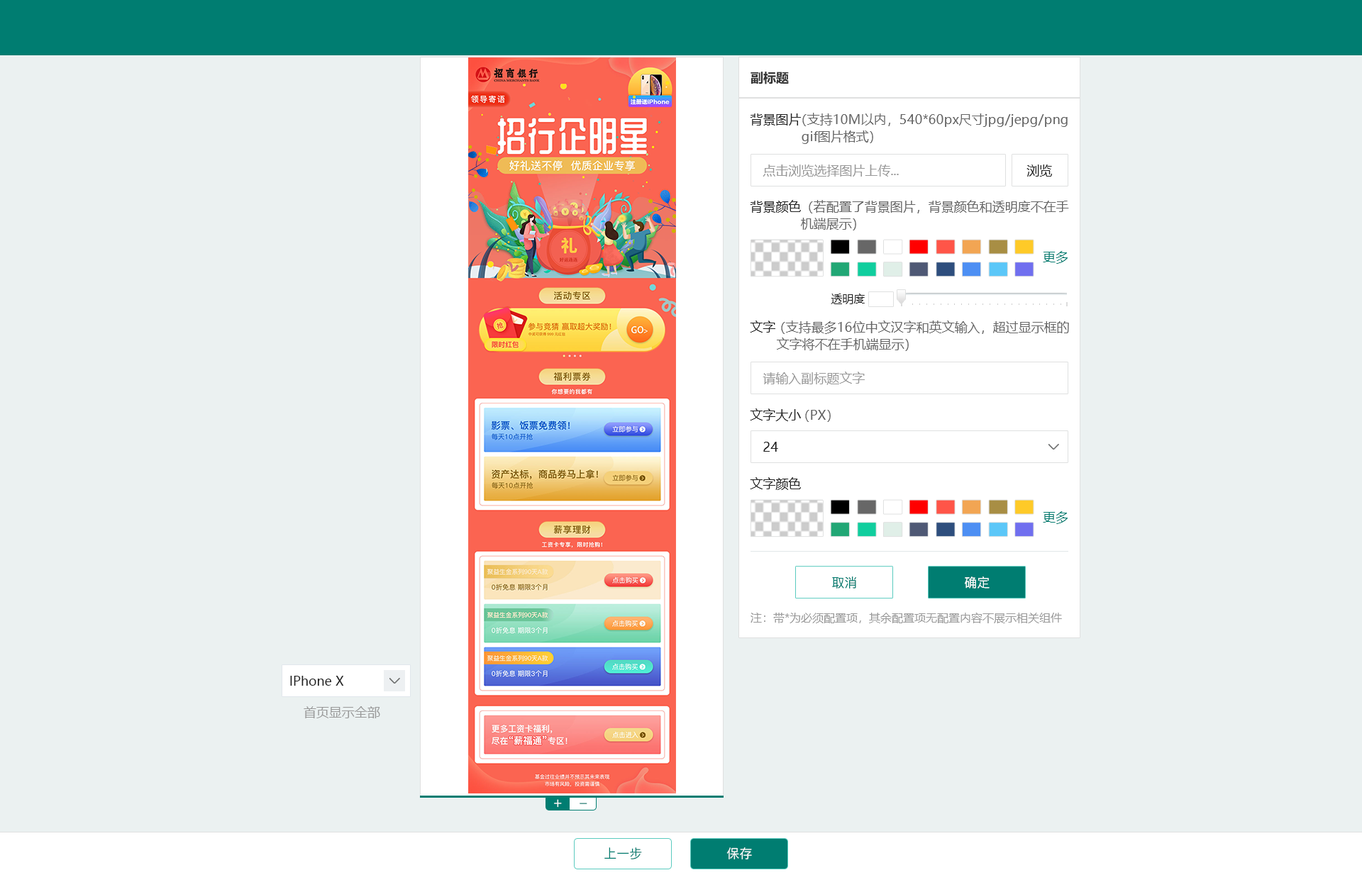
<style>
.page{position:relative;width:1362px;height:875px;background:#ebf1f1}
.page>*{position:absolute;margin:0}
.t1{font:12.8px "MicrosoftYaHei-Bold";color:#333333}
.t2{font:12.8px "MicrosoftYaHei";color:#222222}
.t3{font:12.8px/17px "MicrosoftYaHei";color:#666666}
.t4{font:12.8px "MicrosoftYaHei";color:#999999}
.t5{font:12.8px "MicrosoftYaHei";color:#007d71}
.t6{font:11.4px "MicrosoftYaHei";color:#222222}
.t7{font:12.8px "MicrosoftYaHei";color:#666666}
.t8{font:12.8px "PingFang-SC-Medium";color:#007d71}
.t9{font:12.8px "PingFang-SC-Medium";color:#ffffff}
.t10{font:11.4px "MicrosoftYaHei";color:#999999}
.t11{font:14.2px "PingFang-SC-Medium";color:#ffffff}
.t12{font:14.2px "PingFang-SC-Medium"}
</style>
<div class="page">
<p class="t1" style="left:751px;top:72px;width:38px;height:12px">副标题</p>
<p class="t2" style="left:750px;top:114px;width:51px;height:12px">背景图片</p>
<p class="t3" style="left:802px;top:113px;width:266px;height:31px">（支持10M以内，540*60px尺寸jpg/jepg/png<br>  gif图片格式）</p>
<p class="t4" style="left:763px;top:165px;width:136px;height:12px">点击浏览选择图片上传...</p>
<p class="t2" style="left:1027px;top:165px;width:25px;height:12px">浏览</p>
<p class="t2" style="left:750px;top:200px;width:51px;height:13px">背景颜色</p>
<p class="t3" style="left:801px;top:200px;width:268px;height:31px">（若配置了背景图片，背景颜色和透明度不在手<br>机端展示）</p>
<p class="t5" style="left:1043px;top:251px;width:25px;height:13px">更多</p>
<p class="t6" style="left:831px;top:294px;width:34px;height:10px">透明度</p>
<p class="t2" style="left:750px;top:321px;width:25px;height:12px">文字</p>
<p class="t3" style="left:777px;top:321px;width:292px;height:30px">（支持最多16位中文汉字和英文输入，超过显示框的<br> 文字将不在手机端显示）</p>
<p class="t4" style="left:763px;top:372px;width:102px;height:13px">请输入副标题文字</p>
<p class="t2" style="left:750px;top:409px;width:51px;height:12px">文字大小</p>
<p class="t7" style="left:805px;top:410px;width:26px;height:12px">（PX）</p>
<p class="t2" style="left:763px;top:442px;width:15px;height:10px">24</p>
<p class="t2" style="left:750px;top:477px;width:51px;height:13px">文字颜色</p>
<p class="t5" style="left:1043px;top:511px;width:25px;height:13px">更多</p>
<p class="t8" style="left:832px;top:577px;width:24px;height:12px">取消</p>
<p class="t9" style="left:965px;top:577px;width:25px;height:12px">确定</p>
<p class="t10" style="left:751px;top:613px;width:311px;height:11px">注：带*为必须配置项，其余配置项无配置内容不展示相关组件</p>
<p class="t2" style="left:290px;top:676px;width:54px;height:10px">IPhone X</p>
<p class="t4" style="left:304px;top:707px;width:76px;height:12px">首页显示全部</p>
<p class="t11" style="left:554px;top:800px;width:8px;height:8px">+</p>
<p class="t12" style="left:580px;top:803px;width:7px;height:1px">_</p>
<p class="t8" style="left:604px;top:848px;width:38px;height:12px">上一步</p>
<p class="t9" style="left:726px;top:848px;width:26px;height:12px">保存</p>
</div>
